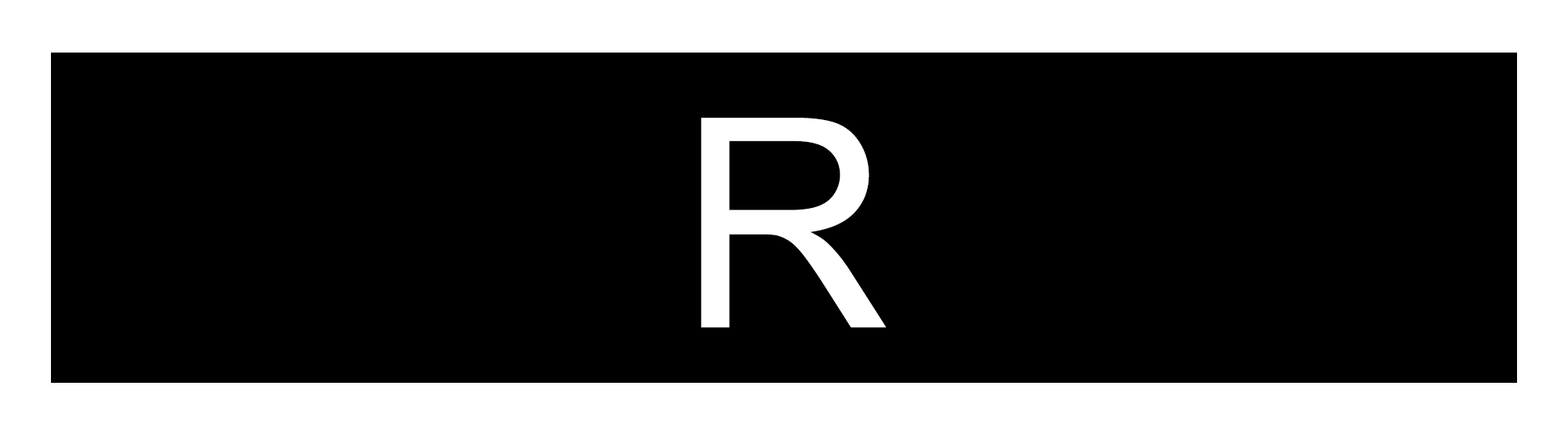
<style>
.page{position:relative;width:1568px;height:433px;background:#000000}
.page>*{position:absolute;margin:0}
.t1{font:292.1px "ArialMT";color:#ffffff}
</style>
<div class="page">
<p class="t1" style="left:701px;top:118px;width:185px;height:210px">R</p>
</div>
